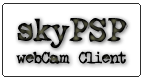
<style>
.page{position:relative;width:144px;height:80px;background:#ffffff}
.page>*{position:absolute;margin:0}
.t1{font:18px "Ghostwriter"}
.t2{font:36px "Ghostwriter"}
</style>
<div class="page">
<p class="t1" style="left:16px;top:18px;width:112px;height:46px;text-align:center"><span class="t2">skyPSP<br></span>webCam Client</p>
</div>
